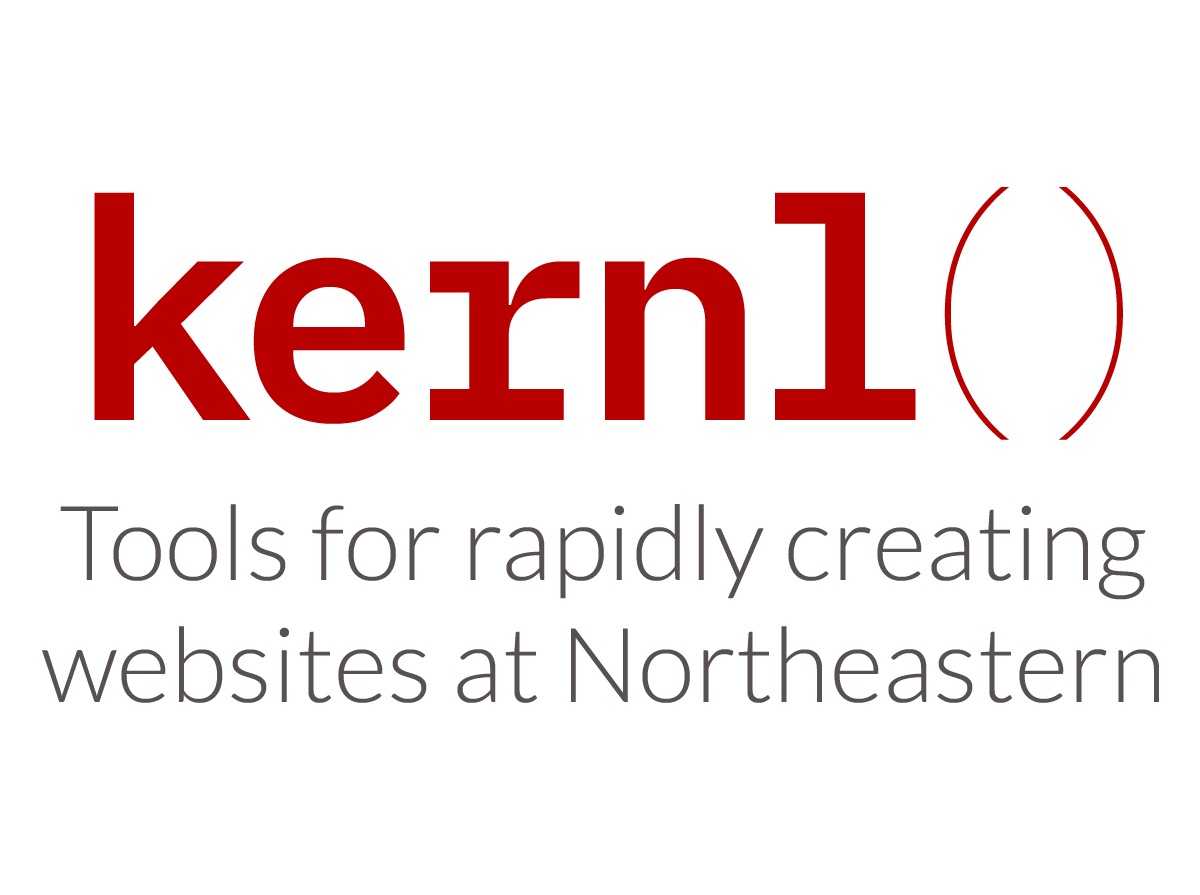
<style>
.page{position:relative;width:1200px;height:895px;background:#ffffff}
.page>*{position:absolute;margin:0}
.t1{font:307.3px "IBMPlexMono-SemiBold";color:#b80000}
.t2{font:281.6px "IBMPlexMono-Thin";color:#b80000}
.t3{font:104.1px/122px "Lato-Light";color:#585151}
</style>
<div class="page">
<p class="t1" style="left:94px;top:187px;width:1029px;height:253px">kernl<span class="t2">()</span></p>
<p class="t3" style="left:42px;top:504px;width:1117px;height:199px;text-align:center">Tools for rapidly creating<br>websites at Northeastern</p>
</div>
